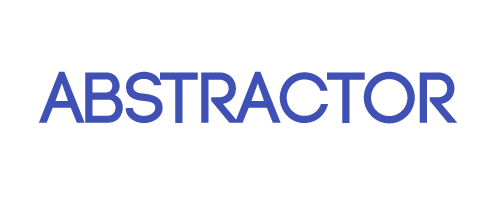
<style>
.page{position:relative;width:500px;height:200px;background:#ffffff}
.page>*{position:absolute;margin:0}
.t1{font:72px "Code-Bold";color:#3f51b5}
</style>
<div class="page">
<p class="t1" style="left:38px;top:71px;width:420px;height:53px">ABSTRACTOR</p>
</div>
